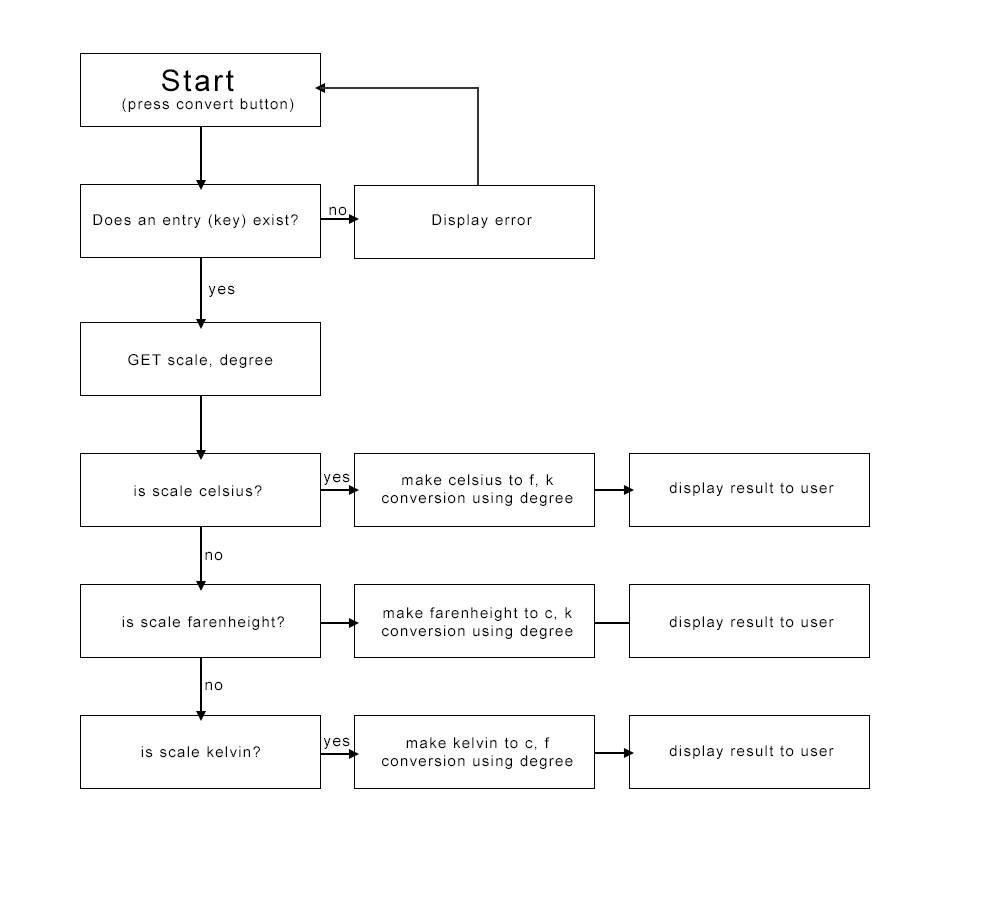
<style>
.page{position:relative;width:1000px;height:900px;background:#ffffff}
.page>*{position:absolute;margin:0}
.t1{font:30px "ArialMT";letter-spacing:0.085em;color:#000000}
.t2{font:15px "ArialMT";letter-spacing:0.085em;color:#000000}
.t3{font:15.3px "ArialMT";letter-spacing:0.085em;color:#000000}
</style>
<div class="page">
<p class="t1" style="left:162px;top:69px;width:72px;height:23px">Start</p>
<p class="t2" style="left:122px;top:98px;width:172px;height:14px">(press convert button)</p>
<p class="t3" style="left:329px;top:206px;width:18px;height:10px">no</p>
<p class="t2" style="left:93px;top:214px;width:205px;height:14px">Does an entry (key) exist?</p>
<p class="t2" style="left:432px;top:214px;width:100px;height:14px">Display error</p>
<p class="t3" style="left:208px;top:285px;width:27px;height:12px">yes</p>
<p class="t2" style="left:128px;top:354px;width:145px;height:14px">GET scale, degree</p>
<p class="t3" style="left:323px;top:473px;width:27px;height:12px">yes</p>
<p class="t2" style="left:134px;top:485px;width:128px;height:12px">is scale celsius?</p>
<p class="t2" style="left:382px;top:474px;width:191px;height:32px;text-align:center">make celsius to f, k<br>conversion using degree</p>
<p class="t2" style="left:669px;top:482px;width:165px;height:14px">display result to user</p>
<p class="t3" style="left:205px;top:551px;width:18px;height:10px">no</p>
<p class="t2" style="left:122px;top:616px;width:162px;height:14px">is scale farenheight?</p>
<p class="t2" style="left:382px;top:607px;width:191px;height:32px;text-align:center">make farenheight to c, k<br>conversion using degree</p>
<p class="t2" style="left:669px;top:616px;width:165px;height:14px">display result to user</p>
<p class="t3" style="left:205px;top:681px;width:18px;height:10px">no</p>
<p class="t3" style="left:323px;top:737px;width:27px;height:12px">yes</p>
<p class="t2" style="left:382px;top:737px;width:191px;height:32px;text-align:center">make kelvin to c, f<br>conversion using degree</p>
<p class="t2" style="left:141px;top:746px;width:119px;height:12px">is scale kelvin?</p>
<p class="t2" style="left:669px;top:745px;width:165px;height:14px">display result to user</p>
</div>
